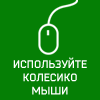
<style>
.page{position:relative;width:100px;height:100px;background:#057f05}
.page>*{position:absolute;margin:0}
.t1{font:11px "Bender-Bold";color:#ffffff}
</style>
<div class="page">
<p class="t1" style="left:13px;top:57px;width:74px;height:38px;text-align:center">ИСПОЛЬЗУЙТЕ<br>КОЛЕСИКО<br>МЫШИ</p>
</div>
